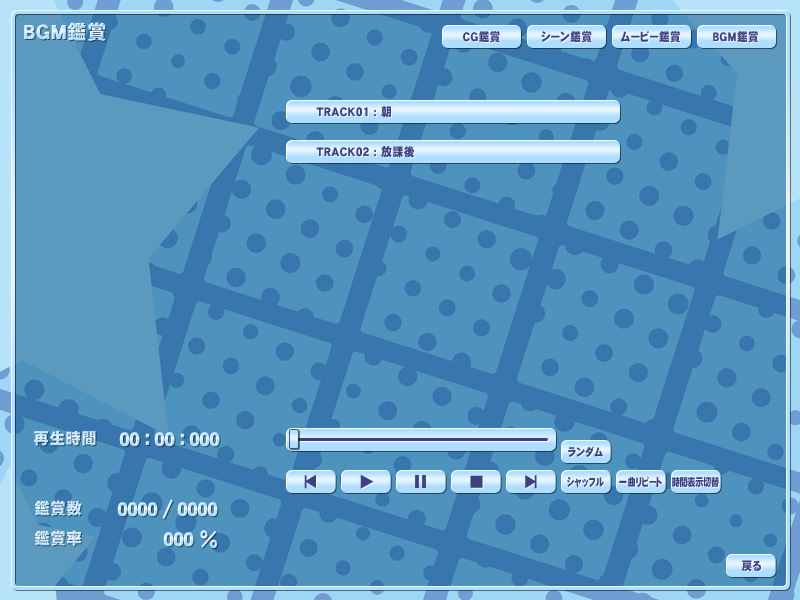
<style>
.page{position:relative;width:800px;height:600px;background:#4e93bd}
.page>*{position:absolute;margin:0}
.t1{font:20px "DFGothic-EB-WING-RKSJ-H";letter-spacing:0.05em;scale:0.95 1}
.t2{font:12px "DFGothic-EB-WING-RKSJ-H";letter-spacing:0.05em;color:#404080;scale:0.87 1}
.t3{font:12px "DFGothic-EB-WING-RKSJ-H";letter-spacing:0.05em;color:#404080;scale:0.9 1}
.t4{font:16px "DFGothic-EB-WING-RKSJ-H";letter-spacing:0.05em;scale:0.95 1}
.t5{font:22px "DFGothic-EB-WING-RKSJ-H";letter-spacing:0.05em;scale:0.9 1}
.t6{font:11px "DFGothic-EB-WING-RKSJ-H";letter-spacing:0.025em;color:#404080;scale:0.85 1}
.t7{font:13px "DFGothic-EB-WING-RKSJ-H";letter-spacing:0.05em;color:#404080;scale:1.07 1}
.t8{font:14.4px "DFGothic-EB-WING-RKSJ-H";letter-spacing:0.025em;color:#404080;scale:1.06 1}
.t9{font:17px "DFGothic-EB-WING-RKSJ-H";letter-spacing:0.025em;color:#404080;scale:0.95 1}
.t10{font:16px "DFGothic-EB-WING-RKSJ-H";letter-spacing:0.025em;color:#404080}
.t11{font:11px "DFGothic-EB-WING-RKSJ-H";letter-spacing:0.025em;color:#404080;scale:0.75 1}
.t12{font:11px "DFGothic-EB-WING-RKSJ-H";letter-spacing:-0.01em;color:#404080;scale:0.75 1}
.t13{font:22px "DFGothic-EB-WING-RKSJ-H";letter-spacing:0.05em;color:#e7f5ff;scale:0.95 1}
</style>
<div class="page">
<p class="t1" style="left:24px;top:22px;width:82px;height:19px">ＢＧＭ鑑賞</p>
<p class="t2" style="left:463px;top:31px;width:37px;height:12px">ＣＧ鑑賞</p>
<p class="t2" style="left:541px;top:31px;width:51px;height:12px">シーン鑑賞</p>
<p class="t2" style="left:620px;top:31px;width:60px;height:12px">ムービー鑑賞</p>
<p class="t2" style="left:713px;top:31px;width:45px;height:12px">ＢＧＭ鑑賞</p>
<p class="t3" style="left:316px;top:106px;width:75px;height:12px">TRACK01 : 朝</p>
<p class="t3" style="left:316px;top:146px;width:99px;height:12px">TRACK02 : 放課後</p>
<p class="t4" style="left:34px;top:430px;width:62px;height:16px">再生時間</p>
<p class="t5" style="left:145px;top:433px;width:5px;height:12px">：</p>
<p class="t5" style="left:180px;top:433px;width:5px;height:12px">：</p>
<p class="t6" style="left:568px;top:446px;width:35px;height:11px">ランダム</p>
<p class="t7" style="left:304px;top:475px;width:3px;height:14px">|</p>
<p class="t8" style="left:305px;top:474px;width:11px;height:14px;rotate:90deg">▼</p>
<p class="t9" style="left:360px;top:474px;width:14px;height:15px;rotate:-90deg">▼</p>
<p class="t10" style="left:470px;top:475px;width:13px;height:13px;rotate:-90deg">■</p>
<p class="t8" style="left:525px;top:475px;width:12px;height:14px;rotate:-90deg">▼</p>
<p class="t7" style="left:534px;top:475px;width:3px;height:14px">|</p>
<p class="t11" style="left:567px;top:477px;width:37px;height:11px">シャッフル</p>
<p class="t11" style="left:619px;top:476px;width:43px;height:12px">一曲リピート</p>
<p class="t12" style="left:672px;top:477px;width:47px;height:11px">時間表示切替</p>
<p class="t4" style="left:34px;top:500px;width:48px;height:16px">鑑賞数</p>
<p class="t13" style="left:162px;top:499px;width:11px;height:20px">/</p>
<p class="t4" style="left:34px;top:530px;width:48px;height:16px">鑑賞率</p>
<p class="t5" style="left:200px;top:530px;width:18px;height:18px">%</p>
<p class="t2" style="left:741px;top:560px;width:20px;height:12px">戻る</p>
</div>
